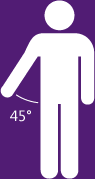
<style>
.page{position:relative;width:95px;height:179px;background:#511c74}
.page>*{position:absolute;margin:0}
.t1{font:15px "SegoeUI";color:#ffffff}
</style>
<div class="page">
<p class="t1" style="left:10px;top:110px;width:21px;height:12px">45°</p>
</div>
